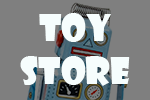
<style>
.page{position:relative;width:150px;height:100px;background:#7f7f7f}
.page>*{position:absolute;margin:0}
.t1{font:36px "ShowcardGothic-Reg";color:#f6fdfd}
</style>
<div class="page">
<p class="t1" style="left:20px;top:13px;width:110px;height:73px;text-align:center">Toy<br>Store</p>
</div>
